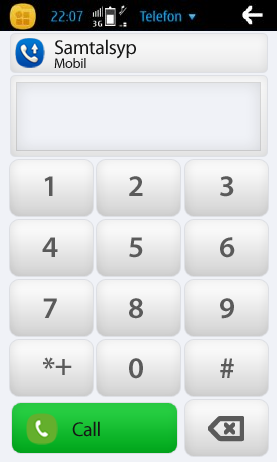
<style>
.page{position:relative;width:277px;height:462px;background:#f0f2f7}
.page>*{position:absolute;margin:0}
.t1{font:20px "MyriadPro-Regular";letter-spacing:-0.02em;color:#161616}
.t2{font:14px "MyriadPro-Regular";letter-spacing:-0.02em;color:#161616}
.t3{font:30px "MyriadPro-Semibold";letter-spacing:-0.02em;color:#5a5a5a}
</style>
<div class="page">
<p class="t1" style="left:54px;top:39px;width:82px;height:29px">Samtalsyp<br><span class="t2">Mobil</span></p>
<p class="t3" style="left:44px;top:176px;width:9px;height:20px">1</p>
<p class="t3" style="left:129px;top:176px;width:14px;height:20px">2</p>
<p class="t3" style="left:220px;top:176px;width:14px;height:21px">3</p>
<p class="t3" style="left:42px;top:237px;width:16px;height:20px">4</p>
<p class="t3" style="left:129px;top:237px;width:14px;height:21px">5</p>
<p class="t3" style="left:220px;top:237px;width:15px;height:21px">6</p>
<p class="t3" style="left:43px;top:298px;width:14px;height:20px">7</p>
<p class="t3" style="left:129px;top:298px;width:14px;height:21px">8</p>
<p class="t3" style="left:220px;top:298px;width:14px;height:21px">9</p>
<p class="t3" style="left:43px;top:357px;width:29px;height:18px">*+</p>
<p class="t3" style="left:129px;top:358px;width:14px;height:21px">0</p>
<p class="t3" style="left:220px;top:358px;width:14px;height:20px">#</p>
<p class="t1" style="left:72px;top:421px;width:28px;height:16px">Call</p>
</div>
